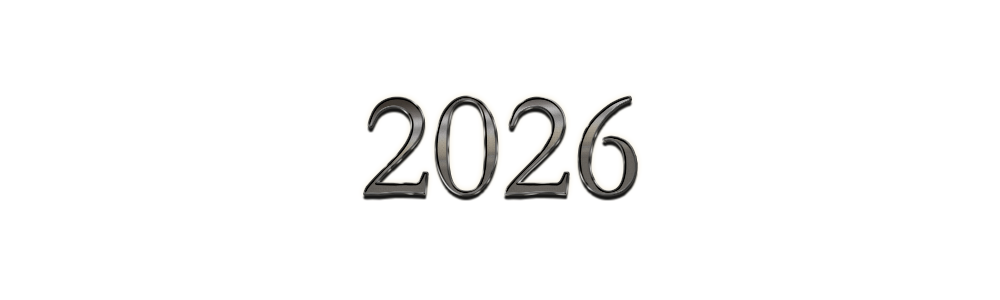
<style>
.page{position:relative;width:1000px;height:300px;background:#ffffff}
.page>*{position:absolute;margin:0}
.t1{font:150px "Garamond"}
</style>
<div class="page">
<p class="t1" style="left:364px;top:97px;width:273px;height:98px">2026</p>
</div>
